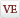
<style>
.page{position:relative;width:20px;height:18px;background:#fbfbfb}
.page>*{position:absolute;margin:0}
.t1{font:12px "ArnoPro-Regular";color:#752420}
</style>
<div class="page">
<p class="t1" style="left:2px;top:5px;width:16px;height:8px">VE</p>
</div>
